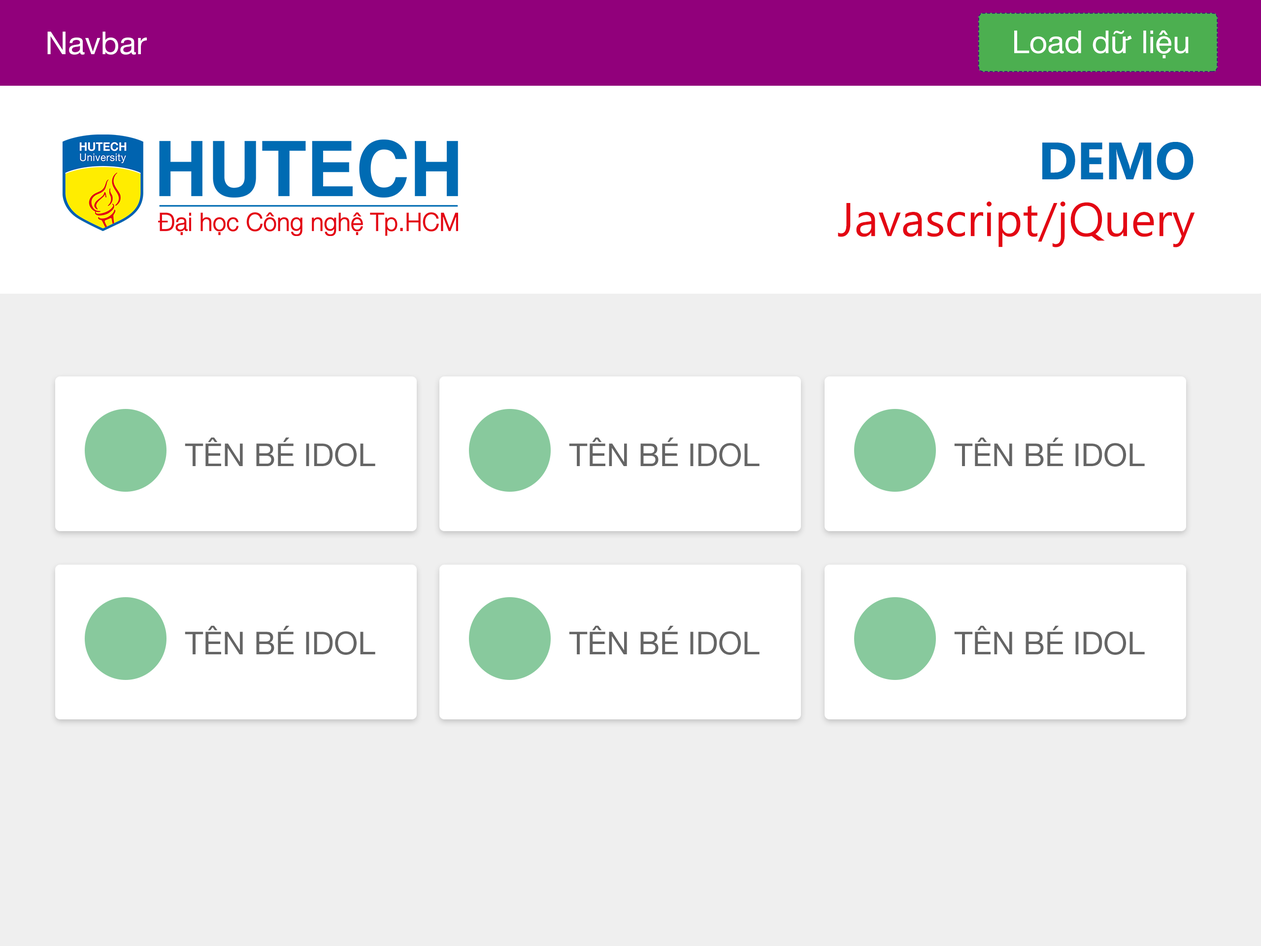
<style>
.page{position:relative;width:1261px;height:946px;background:#ffffff}
.page>*{position:absolute;margin:0}
.t1{font:31.5px "HelveticaNeue";color:#ffffff}
.t2{font:47.3px "SegoeUI";color:#e30613}
.t3{font:52.5px "SegoeUI-Bold";color:#006bb3}
.t4{font:31.5px "HelveticaNeue";color:#656565}
</style>
<div class="page">
<p class="t1" style="left:47px;top:32px;width:100px;height:23px">Navbar</p>
<p class="t1" style="left:1014px;top:30px;width:175px;height:29px">Load dữ liệu</p>
<p class="t2" style="left:838px;top:142px;width:357px;height:105px;text-align:right"><span class="t3">DEMO<br></span> Javascript/jQuery</p>
<p class="t4" style="left:185px;top:437px;width:190px;height:29px">TÊN BÉ IDOL</p>
<p class="t4" style="left:569px;top:437px;width:191px;height:29px">TÊN BÉ IDOL</p>
<p class="t4" style="left:954px;top:437px;width:191px;height:29px">TÊN BÉ IDOL</p>
<p class="t4" style="left:185px;top:626px;width:190px;height:29px">TÊN BÉ IDOL</p>
<p class="t4" style="left:569px;top:626px;width:191px;height:29px">TÊN BÉ IDOL</p>
<p class="t4" style="left:954px;top:626px;width:191px;height:29px">TÊN BÉ IDOL</p>
</div>
